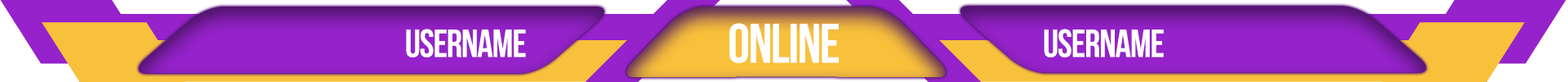
<style>
.page{position:relative;width:1568px;height:82px;background:#9522ca}
.page>*{position:absolute;margin:0}
.t1{font:39.2px "BebasNeue";letter-spacing:-0.025em;color:#ffffff}
.t2{font:55.5px "BebasNeue";letter-spacing:-0.025em;color:#ffffff}
</style>
<div class="page">
<p class="t1" style="left:406px;top:29px;width:120px;height:28px">username</p>
<p class="t2" style="left:729px;top:23px;width:110px;height:40px">ONLINE</p>
<p class="t1" style="left:1044px;top:29px;width:120px;height:28px">username</p>
</div>
